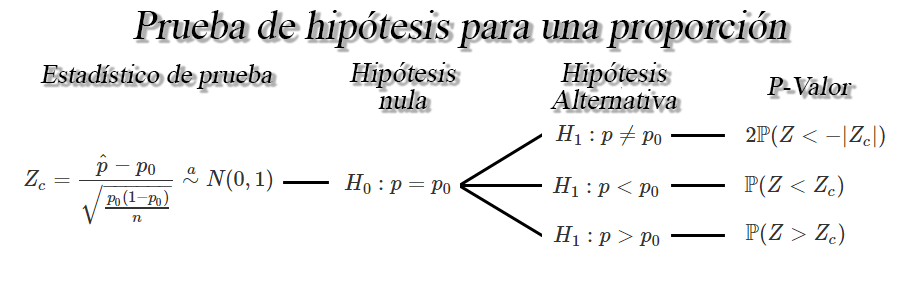
<style>
.page{position:relative;width:915px;height:285px;background:#ffffff}
.page>*{position:absolute;margin:0}
.t1{font:30.5px "TimesNewRomanPSMT";color:#000000;font-style:italic}
.t2{font:20.4px "TimesNewRomanPSMT";color:#000000;font-style:italic}
.t3{font:21.1px/26.9px "TimesNewRomanPSMT";color:#000000;font-style:italic}
</style>
<div class="page">
<p class="t1" style="left:133px;top:10px;width:654px;height:38px">Prueba de hipótesis para una proporción</p>
<p class="t2" style="left:40px;top:64px;width:233px;height:25px">Estadístico de prueba</p>
<p class="t3" style="left:349px;top:62px;width:107px;height:47px;text-align:center">Hipótesis<br>nula</p>
<p class="t3" style="left:550px;top:62px;width:127px;height:47px;text-align:center">Hipótesis<br>Alternativa</p>
<p class="t2" style="left:767px;top:76px;width:85px;height:19px">P-Valor</p>
</div>
